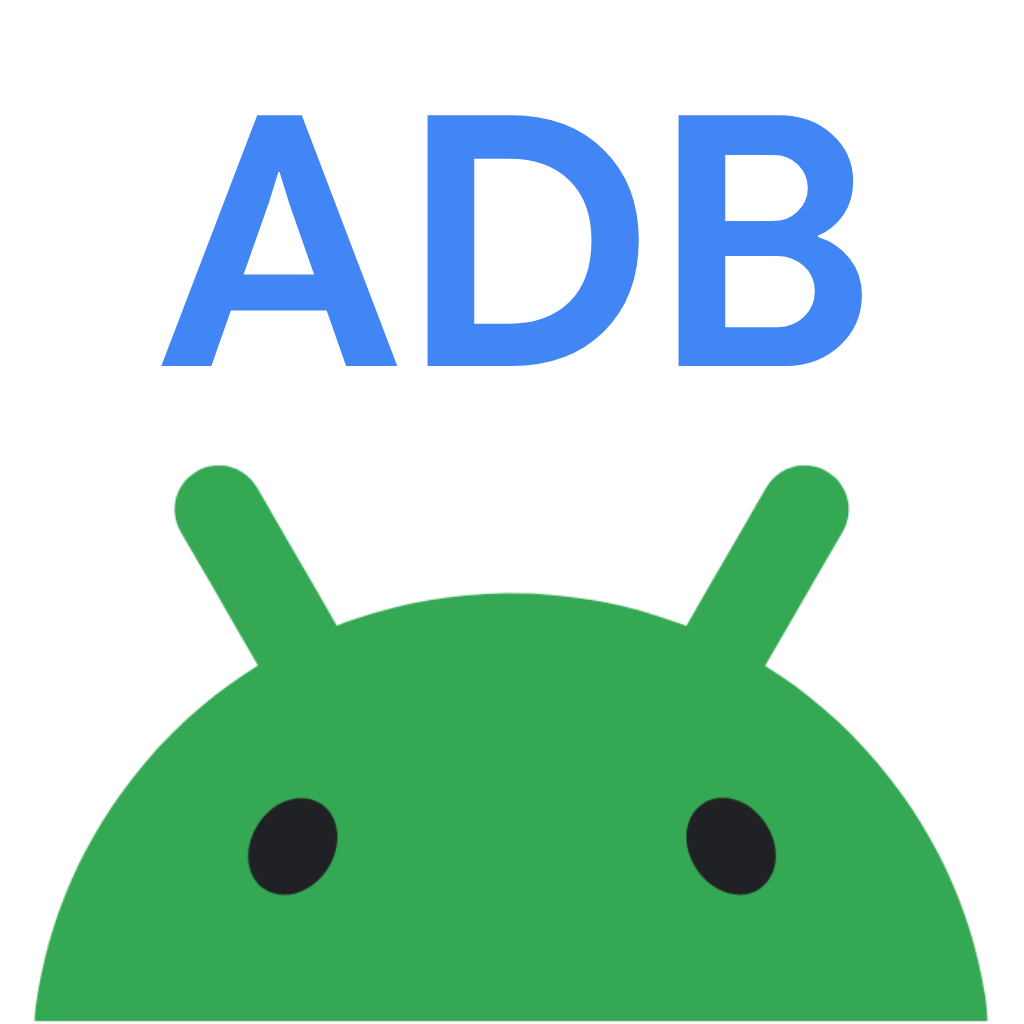
<style>
.page{position:relative;width:1024px;height:1024px;background:#ffffff}
.page>*{position:absolute;margin:0}
.t1{font:350.1px "GoogleSansFlex-SemiBold";color:#4285f4}
</style>
<div class="page">
<p class="t1" style="left:161px;top:115px;width:701px;height:251px">ADB</p>
</div>
